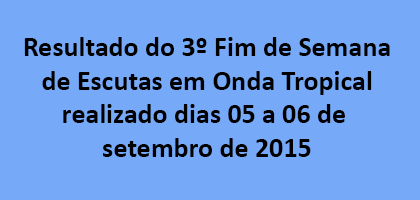
<style>
.page{position:relative;width:420px;height:200px;background:#76a9f8}
.page>*{position:absolute;margin:0}
.t1{font:28px "Calibri-Bold";color:#000000}
</style>
<div class="page">
<p class="t1" style="left:24px;top:37px;width:366px;height:120px;text-align:center">Resultado do 3º Fim de Semana<br>de Escutas em Onda Tropical<br>realizado dias 05 a 06 de <br>setembro de 2015</p>
</div>
